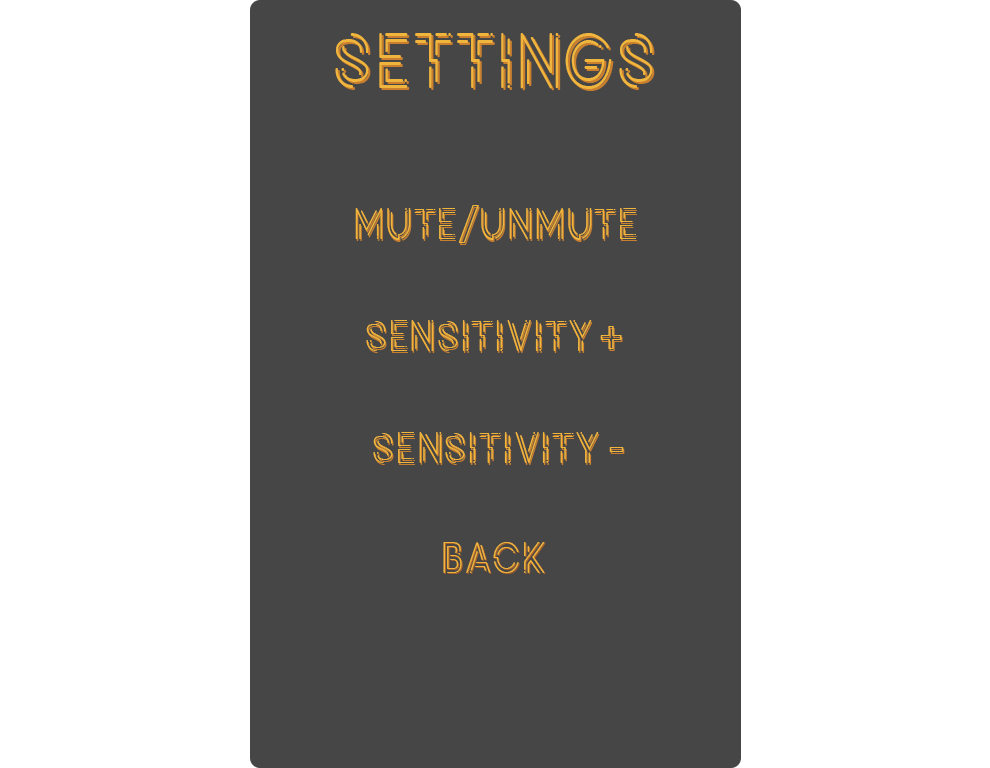
<style>
.page{position:relative;width:990px;height:768px;background:#ffffff}
.page>*{position:absolute;margin:0}
.t1{font:78.6px "Potra";color:#efb53d;scale:0.89 1}
.t2{font:44.5px "Potra";color:#efb53d;scale:0.89 1}
.t3{font:44.5px "Potra";color:#a75f27;scale:0.89 1}
</style>
<div class="page">
<p class="t1" style="left:335px;top:33px;width:318px;height:56px">SETTINGS</p>
<p class="t2" style="left:355px;top:205px;width:281px;height:38px">MUTE/UNMUTE</p>
<p class="t2" style="left:366px;top:320px;width:256px;height:31px">SENSITIVITY +</p>
<p class="t2" style="left:373px;top:432px;width:251px;height:31px">SENSITIVITY -</p>
<p class="t2" style="left:443px;top:542px;width:102px;height:31px">BACK</p>
<p class="t3" style="left:444px;top:543px;width:102px;height:31px">BACK</p>
</div>
